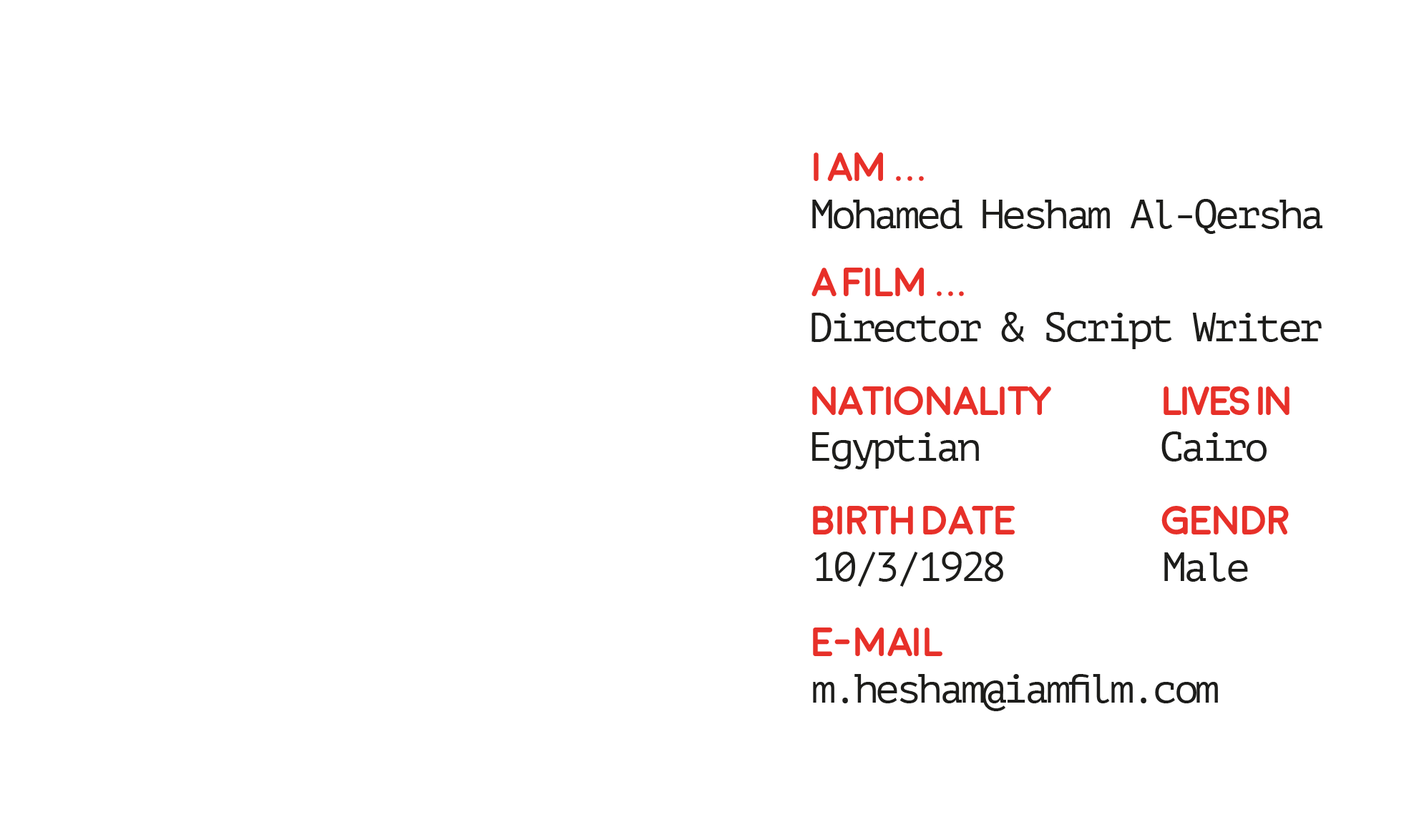
<style>
.page{position:relative;width:1419px;height:840px;background:#ffffff}
.page>*{position:absolute;margin:0}
.t1{font:40.7px "Moon-Bold";letter-spacing:-0.08em;color:#e73029}
.t2{font:40.7px "PTMono-Regular";letter-spacing:-0.08em;color:#1d1d1b}
</style>
<div class="page">
<p class="t1" style="left:814px;top:152px;width:110px;height:29px">i Am ...</p>
<p class="t2" style="left:812px;top:199px;width:511px;height:35px">Mohamed Hesham Al-Qersha</p>
<p class="t1" style="left:812px;top:268px;width:152px;height:28px">a Film ...</p>
<p class="t2" style="left:812px;top:312px;width:510px;height:37px">Director &amp; Script Writer</p>
<p class="t1" style="left:812px;top:386px;width:239px;height:29px">Nationality</p>
<p class="t1" style="left:1164px;top:386px;width:126px;height:29px">LIVES IN</p>
<p class="t2" style="left:812px;top:432px;width:167px;height:37px">Egyptian</p>
<p class="t2" style="left:1162px;top:432px;width:105px;height:30px">Cairo</p>
<p class="t1" style="left:813px;top:506px;width:202px;height:29px">Birth Date</p>
<p class="t1" style="left:1162px;top:506px;width:127px;height:29px">Gendr</p>
<p class="t2" style="left:814px;top:552px;width:189px;height:35px">10/3/1928</p>
<p class="t2" style="left:1164px;top:553px;width:84px;height:29px">Male</p>
<p class="t1" style="left:813px;top:628px;width:130px;height:28px">E-mail</p>
<p class="t2" style="left:813px;top:674px;width:405px;height:37px">m.hesham@iamfilm.com</p>
</div>
